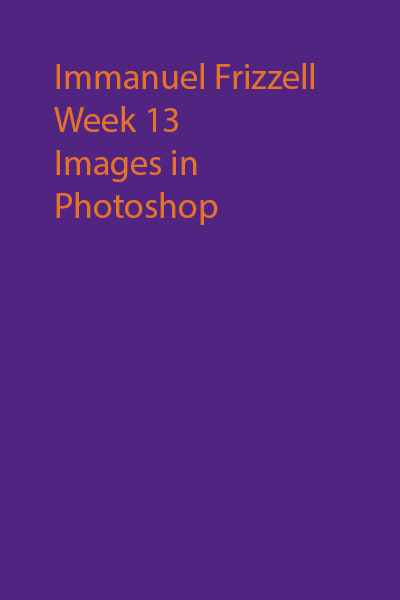
<style>
.page{position:relative;width:400px;height:600px;background:#502480}
.page>*{position:absolute;margin:0}
.t1{font:36px "MyriadPro-Regular";color:#e57327}
</style>
<div class="page">
<p class="t1" style="left:54px;top:63px;width:260px;height:162px">Immanuel Frizzell<br>Week 13<br>Images in Photoshop</p>
</div>
